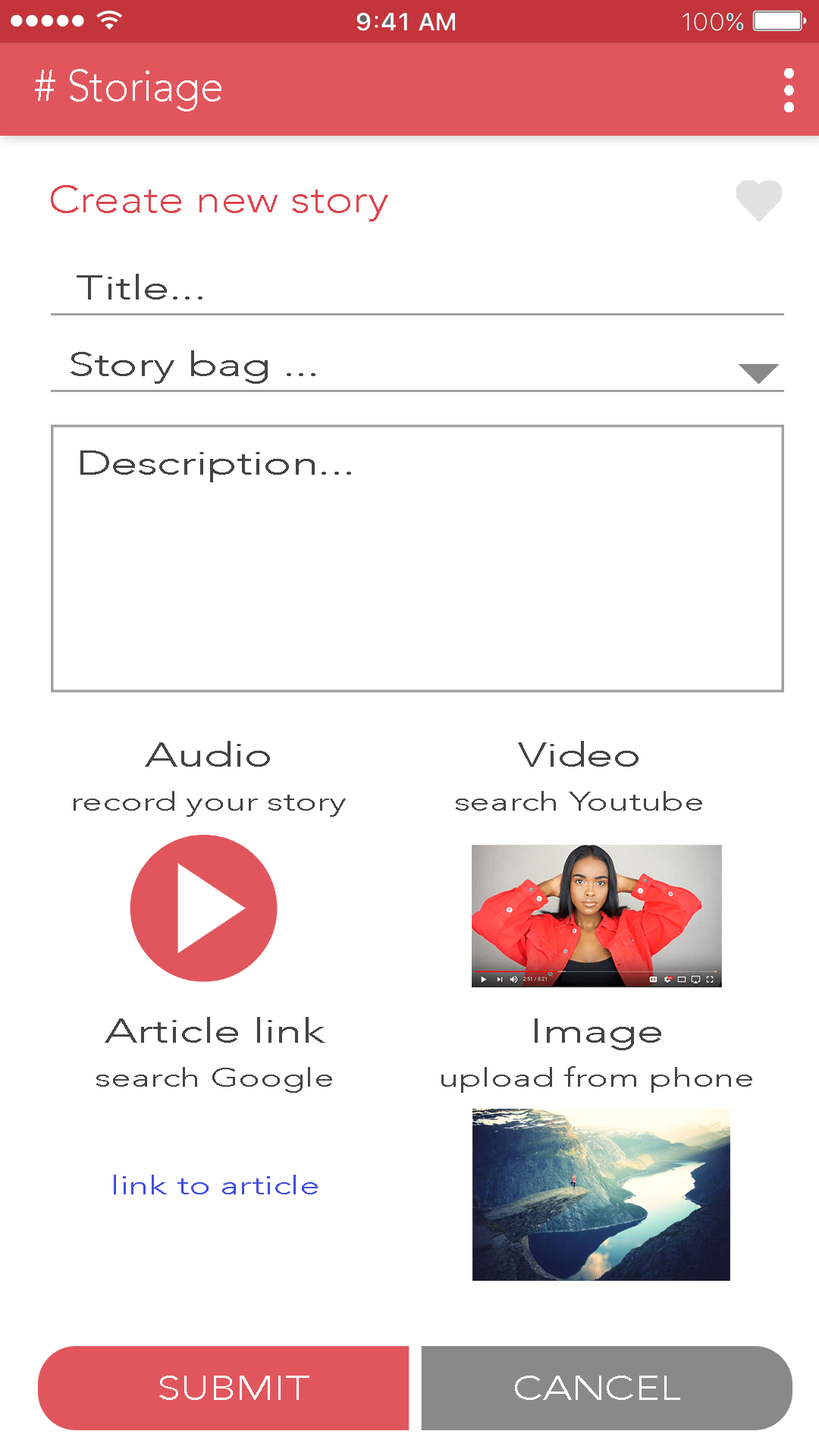
<style>
.page{position:relative;width:819px;height:1456px;background:#ffffff}
.page>*{position:absolute;margin:0}
.t1{font:44px "Avenir-Light";color:#ffffff;scale:0.95 1}
.t2{font:37.9px "Avenir-Light";color:#de454d;scale:1.2 1}
.t3{font:34.1px "Avenir-Light";color:#444444;scale:1.39 1}
.t4{font:26.5px "Avenir-Light";color:#444444;scale:1.39 1}
.t5{font:26.5px "Avenir-Light";color:#424de1;scale:1.39 1}
</style>
<div class="page">
<p class="t1" style="left:35px;top:69px;width:186px;height:42px"># Storiage</p>
<p class="t2" style="left:51px;top:185px;width:337px;height:36px">Create new story</p>
<p class="t3" style="left:77px;top:274px;width:125px;height:26px">Title...</p>
<p class="t3" style="left:71px;top:350px;width:244px;height:34px">Story bag ...</p>
<p class="t3" style="left:80px;top:450px;width:271px;height:32px">Description...</p>
<p class="t4" style="left:74px;top:741px;width:272px;height:76px;text-align:center"><span class="t3">Audio<br></span>record your story</p>
<p class="t4" style="left:456px;top:741px;width:246px;height:70px;text-align:center"><span class="t3">Video<br></span>search Youtube</p>
<p class="t4" style="left:96px;top:1017px;width:236px;height:76px;text-align:center"><span class="t3">Article link<br></span>search Google</p>
<p class="t4" style="left:441px;top:1018px;width:311px;height:75px;text-align:center"><span class="t3">Image<br></span>upload from phone</p>
<p class="t5" style="left:114px;top:1175px;width:204px;height:19px">link to article</p>
</div>
